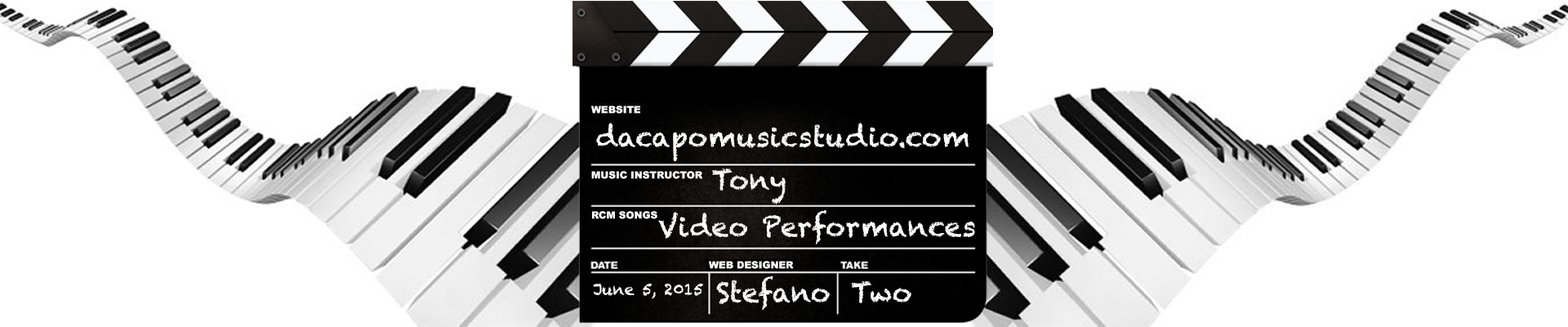
<style>
.page{position:relative;width:1568px;height:327px;background:#ffffff}
.page>*{position:absolute;margin:0}
.t1{font:9.8px "Arial-Black";letter-spacing:0.005em;color:#ffffff}
.t2{font:27.2px "Chalkduster";letter-spacing:0.005em;color:#ffffff}
.t3{font:15.8px "Chalkduster";letter-spacing:0.005em;color:#ffffff}
</style>
<div class="page">
<p class="t1" style="left:591px;top:105px;width:49px;height:9px">WEBSITE</p>
<p class="t2" style="left:596px;top:122px;width:373px;height:40px">dacapomusicstudio.com</p>
<p class="t1" style="left:591px;top:171px;width:111px;height:8px">MUSIC INSTRUCTOR</p>
<p class="t2" style="left:712px;top:168px;width:74px;height:36px">Tony</p>
<p class="t2" style="left:658px;top:210px;width:317px;height:34px">Video Performances</p>
<p class="t1" style="left:592px;top:211px;width:65px;height:8px">RCM SONGS</p>
<p class="t1" style="left:709px;top:261px;width:85px;height:8px">WEB DESIGNER</p>
<p class="t2" style="left:716px;top:275px;width:114px;height:35px">Stefano</p>
<p class="t2" style="left:851px;top:281px;width:60px;height:22px">Two</p>
<p class="t3" style="left:593px;top:283px;width:110px;height:16px">June 5, 2015</p>
</div>
